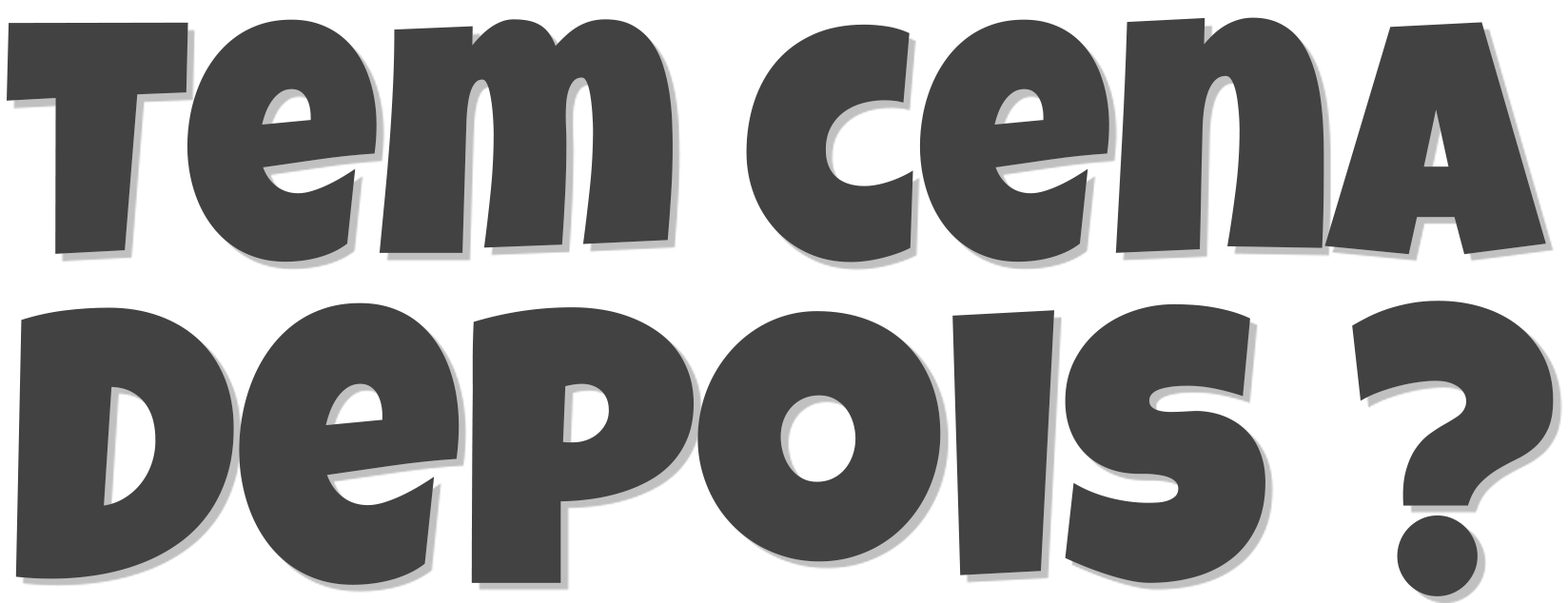
<style>
.page{position:relative;width:1568px;height:603px;background:#424242}
.page>*{position:absolute;margin:0}
.t1{font:337px "LuckiestGuy-Regular";color:#424242}
.t2{font:392.1px "LuckiestGuy-Regular";color:#424242}
</style>
<div class="page">
<p class="t1" style="left:7px;top:17px;width:1539px;height:246px">Tem cena</p>
<p class="t2" style="left:15px;top:301px;width:1539px;height:296px">Depois ?</p>
</div>
